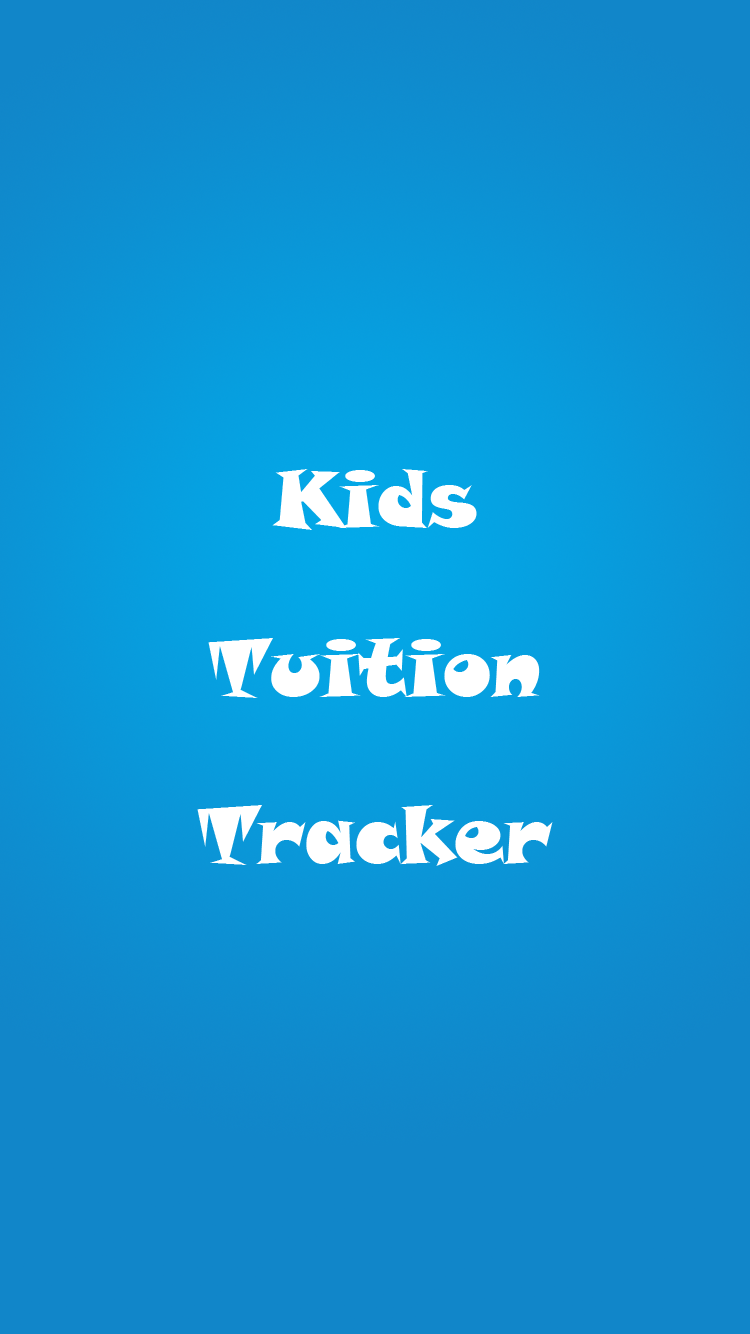
<style>
.page{position:relative;width:750px;height:1334px}
.page>*{position:absolute;margin:0}
.t1{font:80px "SnapITC-Regular";color:#ffffff}
</style>
<div class="page">
<p class="t1" style="left:272px;top:469px;width:205px;height:61px">Kids</p>
<p class="t1" style="left:208px;top:638px;width:332px;height:60px">Tuition</p>
<p class="t1" style="left:197px;top:805px;width:356px;height:61px">Tracker</p>
</div>
